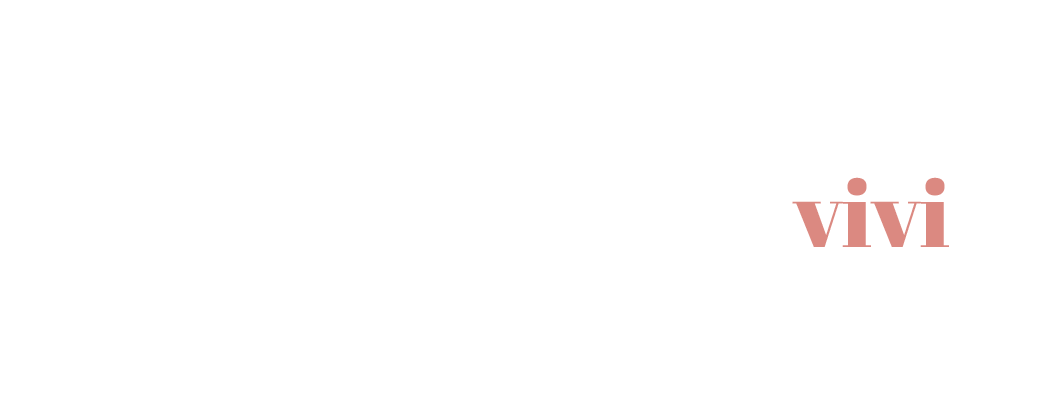
<style>
.page{position:relative;width:1054px;height:398px;background:#ffffff}
.page>*{position:absolute;margin:0}
.t1{font:94.9px "AbrilFatface-Regular";color:#db8981}
</style>
<div class="page">
<p class="t1" style="left:792px;top:177px;width:157px;height:70px">vivi</p>
</div>
